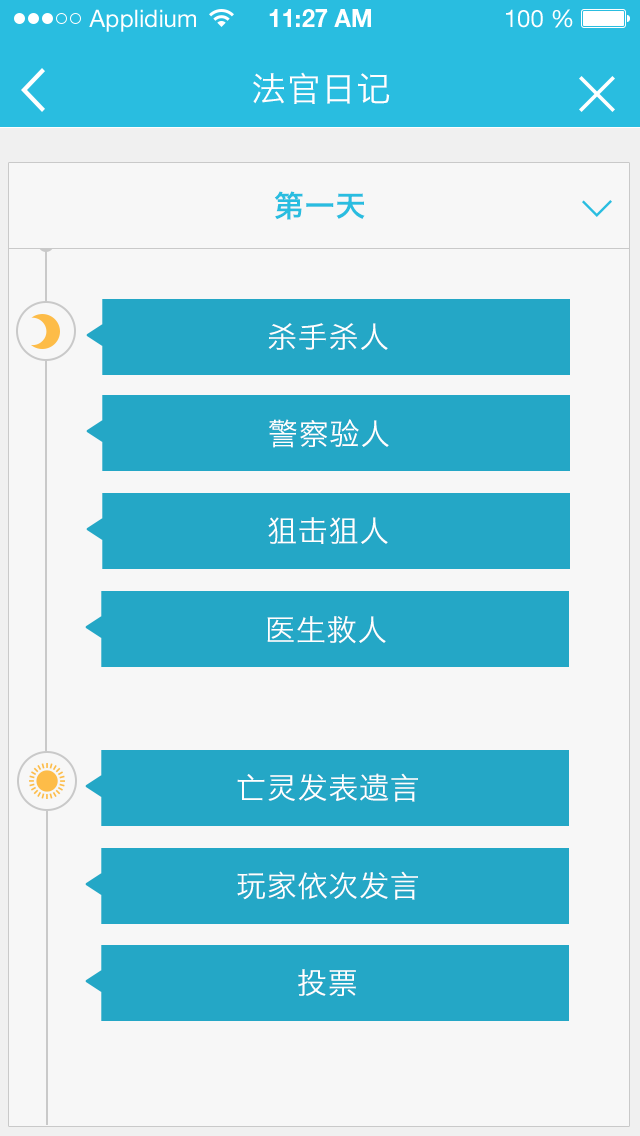
<style>
.page{position:relative;width:640px;height:1136px;background:#f7f7f7}
.page>*{position:absolute;margin:0}
.t1{font:34px "HiraginoSansGB-W3";letter-spacing:0.025em;color:#ffffff}
.t2{font:30px "HiraginoSansGB-W6";letter-spacing:0.025em;color:#29bde0}
.t3{font:30px "HiraginoSansGB-W3";letter-spacing:0.025em;color:#ffffff}
</style>
<div class="page">
<p class="t1" style="left:253px;top:72px;width:137px;height:32px">法官日记</p>
<p class="t2" style="left:274px;top:191px;width:91px;height:29px">第一天</p>
<p class="t3" style="left:268px;top:323px;width:120px;height:27px">杀手杀人</p>
<p class="t3" style="left:269px;top:419px;width:120px;height:29px">警察验人</p>
<p class="t3" style="left:268px;top:517px;width:120px;height:27px">狙击狙人</p>
<p class="t3" style="left:267px;top:616px;width:119px;height:28px">医生救人</p>
<p class="t3" style="left:237px;top:773px;width:181px;height:29px">亡灵发表遗言</p>
<p class="t3" style="left:237px;top:871px;width:181px;height:29px">玩家依次发言</p>
<p class="t3" style="left:298px;top:969px;width:58px;height:27px">投票</p>
</div>
